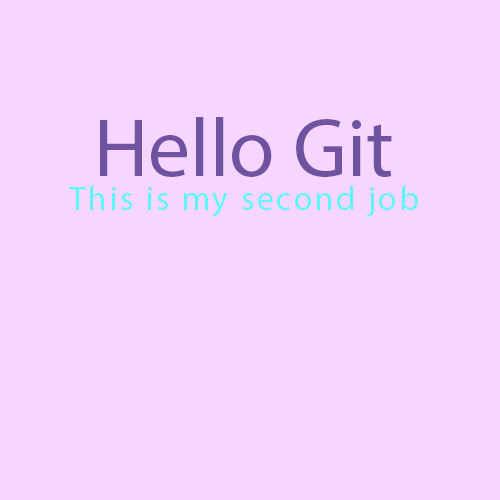
<style>
.page{position:relative;width:500px;height:500px;background:#f6d6ff}
.page>*{position:absolute;margin:0}
.t1{font:83.3px "MyriadPro-Regular";color:#7053a0}
.t2{font:33.6px "MyriadPro-Regular";letter-spacing:0.08em;color:#5ff6f8}
</style>
<div class="page">
<p class="t1" style="left:100px;top:117px;width:292px;height:60px">Hello Git</p>
<p class="t2" style="left:69px;top:186px;width:349px;height:31px">This is my second job</p>
</div>
